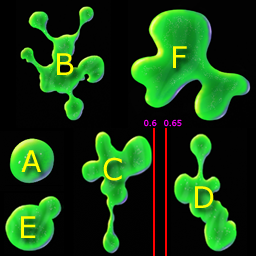
<style>
.page{position:relative;width:256px;height:256px;background:#020202}
.page>*{position:absolute;margin:0}
.t1{font:30px "Verdana";color:#ffff00}
.t2{font:8px "Verdana";color:#ff00ff}
</style>
<div class="page">
<p class="t1" style="left:57px;top:53px;width:17px;height:22px">B</p>
<p class="t1" style="left:173px;top:46px;width:14px;height:22px">F</p>
<p class="t2" style="left:144px;top:119px;width:13px;height:8px">0.6</p>
<p class="t2" style="left:164px;top:119px;width:18px;height:8px">0.65</p>
<p class="t1" style="left:21px;top:150px;width:20px;height:22px">A</p>
<p class="t1" style="left:103px;top:157px;width:19px;height:24px">C</p>
<p class="t1" style="left:195px;top:186px;width:19px;height:22px">D</p>
<p class="t1" style="left:21px;top:216px;width:15px;height:22px">E</p>
</div>
